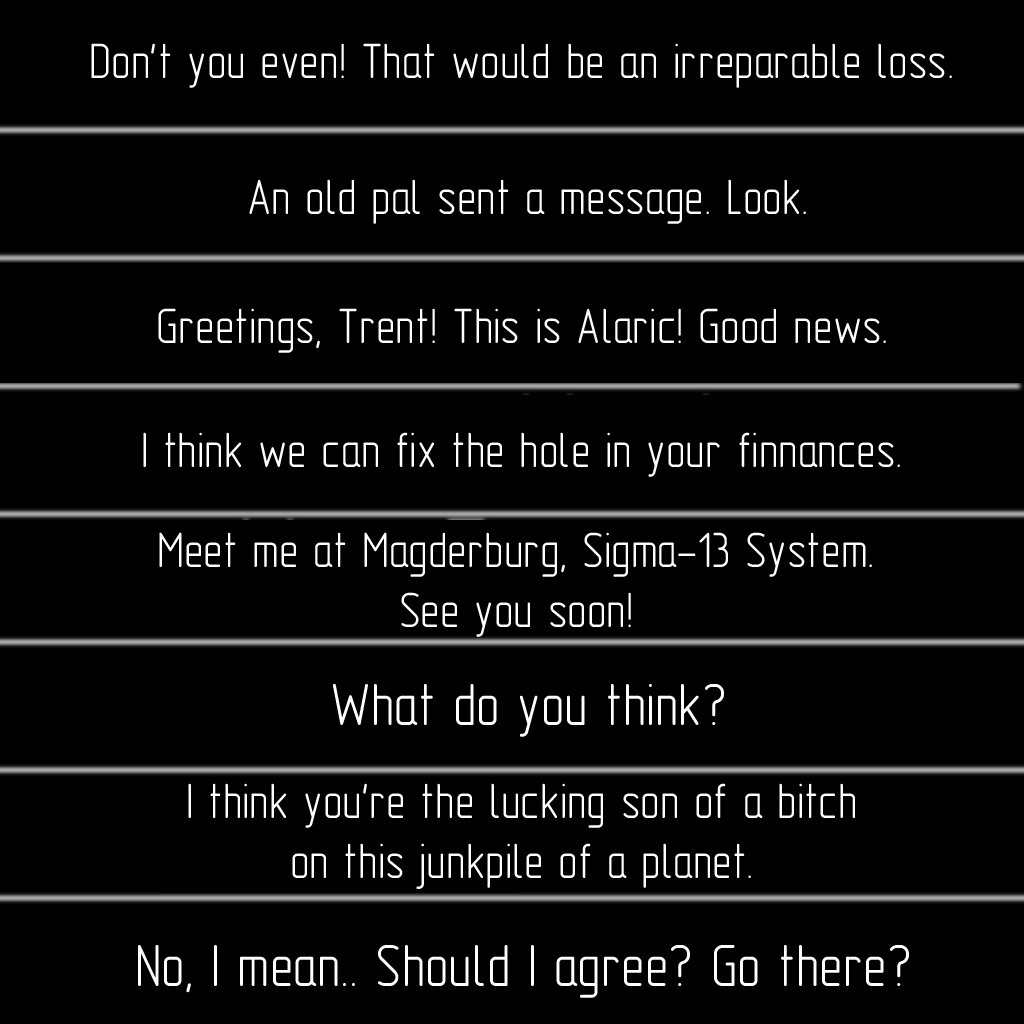
<style>
.page{position:relative;width:1024px;height:1024px;background:#000000}
.page>*{position:absolute;margin:0}
.t1{font:50px "GOST-2.304-81typeA";color:#ffffff}
.t2{font:60px "GOST-2.304-81typeA";color:#ffffff}
</style>
<div class="page">
<p class="t1" style="left:91px;top:43px;width:861px;height:45px">Don't you even! That would be an irreparable loss.</p>
<p class="t1" style="left:249px;top:179px;width:557px;height:45px">An old pal sent a message. Look.</p>
<p class="t1" style="left:158px;top:308px;width:728px;height:45px">Greetings, Trent! This is Alaric! Good news.</p>
<p class="t1" style="left:143px;top:432px;width:757px;height:45px">I think we can fix the hole in your finnances.</p>
<p class="t1" style="left:159px;top:532px;width:713px;height:105px;text-align:center">Meet me at Magderburg, Sigma-13 System.<br>See you soon!</p>
<p class="t2" style="left:333px;top:684px;width:391px;height:53px">What do you think?</p>
<p class="t1" style="left:188px;top:783px;width:667px;height:106px;text-align:center">I think you're the lucking son of a bitch<br>on this junkpile of a planet.</p>
<p class="t2" style="left:138px;top:945px;width:771px;height:53px">No, I mean.. Should I agree? Go there?</p>
</div>
